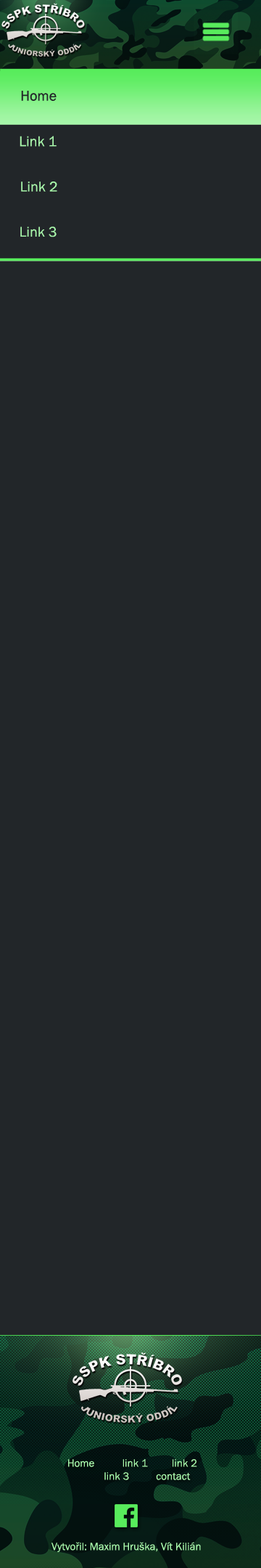
<style>
.page{position:relative;width:261px;height:1568px;background:#222629}
.page>*{position:absolute;margin:0}
.t1{font:14.5px "FranklinGothic-Book";color:#222629}
.t2{font:14.5px "FranklinGothic-Book";color:#a8f6aa}
.t3{font:10.9px "FranklinGothic-Book";color:#a8f6aa}
</style>
<div class="page">
<p class="t1" style="left:21px;top:91px;width:36px;height:10px">Home</p>
<p class="t2" style="left:20px;top:136px;width:37px;height:11px">Link 1</p>
<p class="t2" style="left:21px;top:181px;width:36px;height:11px">Link 2</p>
<p class="t2" style="left:20px;top:226px;width:37px;height:11px">Link 3</p>
<p class="t3" style="left:68px;top:1459px;width:129px;height:21px;text-align:center">Home  link 1  link 2   <br>link 3  contact</p>
<p class="t3" style="left:52px;top:1542px;width:149px;height:10px">Vytvořil: Maxim Hruška, Vít Kilián</p>
</div>
